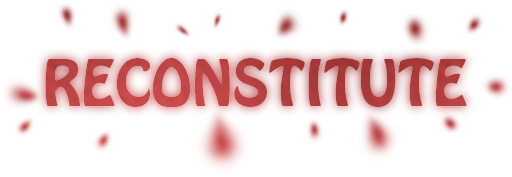
<style>
.page{position:relative;width:512px;height:177px;background:#ffffff}
.page>*{position:absolute;margin:0}
.t1{font:57px "HoboStd";color:#b74141}
</style>
<div class="page">
<p class="t1" style="left:45px;top:58px;width:422px;height:49px">RECONSTITUTE</p>
</div>
